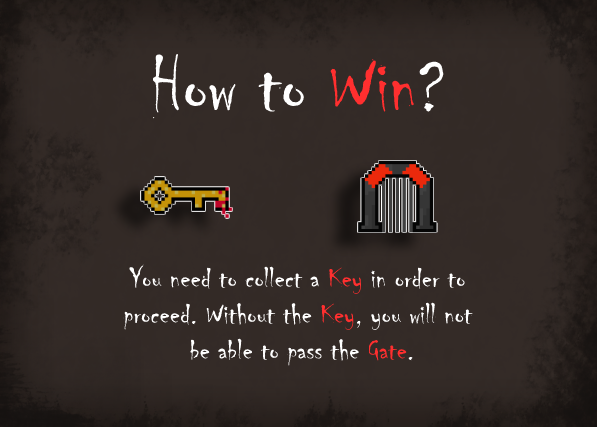
<style>
.page{position:relative;width:597px;height:427px;background:#342b27}
.page>*{position:absolute;margin:0}
.t1{font:80px "Chiller-Regular";color:#ffffff}
.t2{font:80px "Chiller-Regular";color:#ff2f2f}
.t3{font:30px "Chiller-Regular";color:#ffffff}
.t4{font:30px "Chiller-Regular";color:#ff2f2f}
</style>
<div class="page">
<p class="t1" style="left:152px;top:54px;width:292px;height:65px">How to <span class="t2">Win</span>?</p>
<p class="t3" style="left:123px;top:264px;width:350px;height:102px;text-align:center">You need to collect a <span class="t4">Key </span>in order to <br>proceed. Without the <span class="t4">Key</span>, you will not <br>be able to pass the <span class="t4">Gate</span>.</p>
</div>
